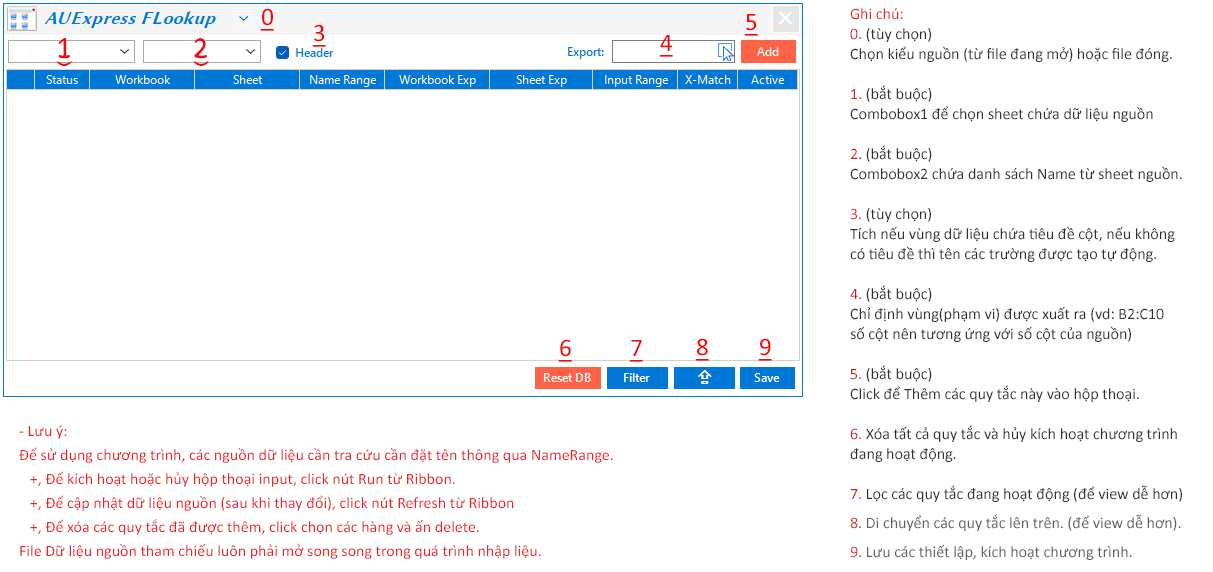
<style>
.page{position:relative;width:1213px;height:572px;background:#ffffff}
.page>*{position:absolute;margin:0}
.t1{font:25.3px "Calibri";color:#f00a0a;text-decoration:underline}
.t2{font:16px/20px "Calibri";color:#2e2e2e}
.t3{font:16px/34.7px "Calibri";color:#e42727}
.t4{font:16px/20px "Calibri";color:#ce1b1b}
.t5{font:16px/20px "Calibri";color:#cf1b1b}
.t6{font:16px/29.3px "Calibri";color:#cf2a2a}
.t7{font:16px/29.3px "Calibri";color:#5d5d5d}
.t8{font:16px/29.3px "Calibri";color:#de2f2f}
.t9{font:15.8px/24px "Calibri";color:#e42727}
.t10{font:15.8px/26.7px "Calibri";color:#e42727}
</style>
<div class="page">
<p class="t1" style="left:260px;top:8px;width:14px;height:23px">0</p>
<p class="t1" style="left:744px;top:14px;width:14px;height:22px">5</p>
<p class="t2" style="left:850px;top:8px;width:332px;height:552px"><span class="t3">Ghi chú:<br></span><span class="t4">0.</span> (tùy chọn) <br>Chọn kiểu nguồn (từ file đang mở) hoặc file đóng.<br><br><span class="t4">1.</span> (bắt buộc)<br>Combobox1 để chọn sheet chứa dữ liệu nguồn<br><br><span class="t5">2</span>. (bắt buộc)<br>Combobox2 chứa danh sách Name từ sheet nguồn.<br><br><span class="t5">3.</span> (tùy chọn) <br>Tích nếu vùng dữ liệu chứa tiêu đề cột, nếu không<br>có tiêu đề thì tên các trường được tạo tự động.<br><br><span class="t5">4.</span> (bắt buộc)<br>Chỉ định vùng(phạm vi) được xuất ra (vd: B2:C10<br>số cột nên tương ứng với số cột của nguồn)<br><br><span class="t5">5.</span> (bắt buộc)<br>Click để Thêm các quy tắc này vào hộp thoại.<br><br><span class="t5">6.</span> Xóa tất cả quy tắc và hủy kích hoạt chương trình<br>đang hoạt động.<br><br><span class="t5">7.</span> Lọc các quy tắc đang hoạt động (để view dễ hơn)<br><span class="t6">8</span><span class="t7">. Di chuyển các quy tắc lên trên. (để view dễ hơn).<br></span><span class="t8">9</span><span class="t7">. Lưu các thiết lập, kích hoạt chương trình.</span></p>
<p class="t1" style="left:312px;top:24px;width:14px;height:23px">3</p>
<p class="t1" style="left:57px;top:38px;width:15px;height:28px">1</p>
<p class="t1" style="left:194px;top:38px;width:15px;height:28px">2</p>
<p class="t1" style="left:659px;top:35px;width:14px;height:22px">4</p>
<p class="t1" style="left:558px;top:339px;width:14px;height:23px">6</p>
<p class="t1" style="left:629px;top:340px;width:14px;height:22px">7</p>
<p class="t1" style="left:695px;top:338px;width:14px;height:23px">8</p>
<p class="t1" style="left:758px;top:338px;width:14px;height:23px">9</p>
<p class="t9" style="left:19px;top:425px;width:594px;height:134px">- Lưu ý:<br>Để sử dụng chương trình, các nguồn dữ liệu cần tra cứu cần đặt tên thông qua NameRange.<br>   +, Để kích hoạt hoặc hủy hộp thoại input, click nút Run từ Ribbon.<br>   +, Để cập nhật dữ liệu nguồn (sau khi thay đổi), click nút Refresh từ Ribbon<br>   +, Để xóa các quy tắc đã được thêm, click chọn các hàng và ấn delete.<br>File Dữ liệu nguồn tham chiếu luôn phải mở song song trong quá trình nhập liệu.<br><span class="t10"></span></p>
</div>
